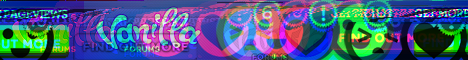
<style>
.page{position:relative;width:468px;height:60px}
.page>*{position:absolute;margin:0}
.t1{font:12px "Archer-BoldLF";letter-spacing:-0.075em;font-weight:bold}
.t2{font:12px "GothamRounded-Bold";font-weight:bold}
.t3{font:8px "GothamRounded-Bold"}
</style>
<div class="page">
<p class="t1" style="left:330px;top:8px;width:122px;height:10px">GET MORE PAGEVIEWS</p>
<p class="t2" style="left:339px;top:33px;width:106px;height:10px">FIND OUT MORE</p>
<p class="t3" style="left:40px;top:46px;width:36px;height:6px">FORUMS</p>
</div>
